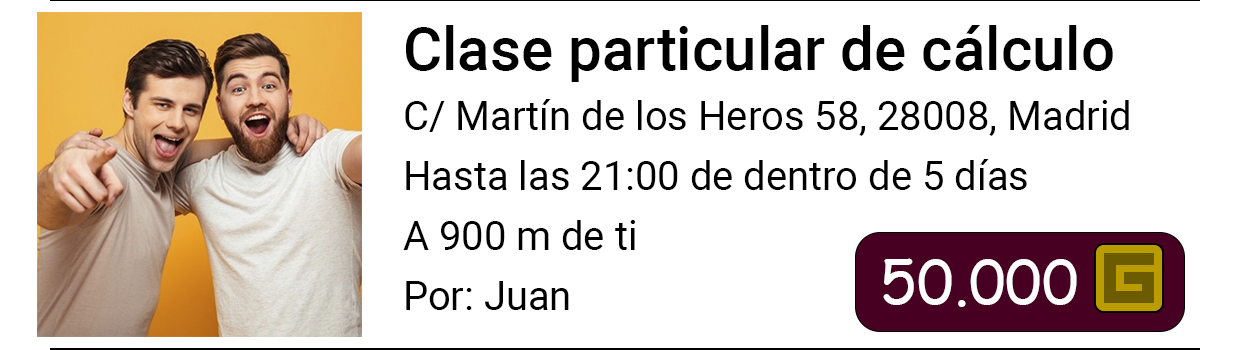
<style>
.page{position:relative;width:1250px;height:350px;background:#ffffff}
.page>*{position:absolute;margin:0}
.t1{font:40px "Roboto-Regular";color:#000000}
.t2{font:60px "Roboto-Medium";color:#000000}
.t3{font:60px "ComicSansMS";color:#ffffff}
</style>
<div class="page">
<p class="t1" style="left:403px;top:25px;width:726px;height:285px"><span class="t2">Clase particular de cálculo<br><br></span>C/ Martín de los Heros 58, 28008, Madrid<br><br>Hasta las 21:00 de dentro de 5 días<br><br>A 900 m de ti<br><br>Por: Juan</p>
<p class="t3" style="left:883px;top:258px;width:194px;height:49px">50.000</p>
</div>
